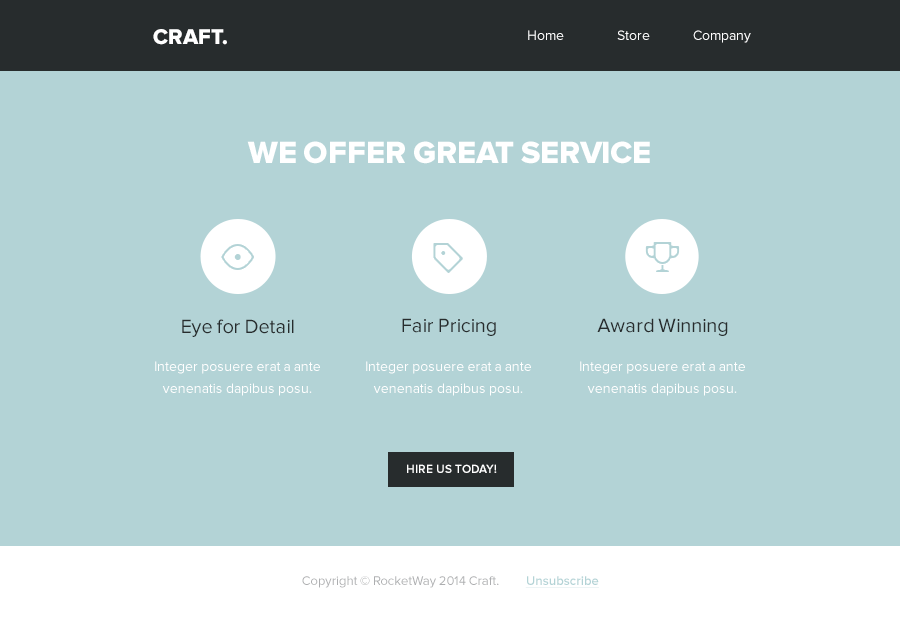
<style>
.page{position:relative;width:900px;height:617px;background:#b3d3d6}
.page>*{position:absolute;margin:0}
.t1{font:22px "ProximaNova-Extrabld";color:#ffffff;text-transform:uppercase}
.t2{font:14px "ProximaNova-Regular";color:#ffffff}
.t3{font:32px "ProximaNova-Extrabld";color:#ffffff;text-transform:uppercase}
.t4{font:20px "ProximaNova-Regular";color:#272c2d}
.t5{font:14px/22px "ProximaNova-Regular";color:#ffffff}
.t6{font:12px "ProximaNova-Semibold";color:#ffffff;text-transform:uppercase}
.t7{font:13px "ProximaNova-Regular";color:#adaeb0}
.t8{font:13px "ProximaNova-Semibold";color:#b3d3d6;text-decoration:underline}
</style>
<div class="page">
<p class="t1" style="left:153px;top:29px;width:74px;height:16px">Craft.</p>
<p class="t2" style="left:528px;top:30px;width:36px;height:10px">Home</p>
<p class="t2" style="left:617px;top:30px;width:33px;height:10px">Store</p>
<p class="t2" style="left:693px;top:30px;width:58px;height:13px">Company</p>
<p class="t3" style="left:247px;top:141px;width:403px;height:23px">We Offer Great Service</p>
<p class="t4" style="left:402px;top:318px;width:94px;height:18px">Fair Pricing</p>
<p class="t4" style="left:597px;top:318px;width:131px;height:18px">Award Winning</p>
<p class="t4" style="left:182px;top:319px;width:112px;height:18px">Eye for Detail</p>
<p class="t5" style="left:155px;top:361px;width:165px;height:35px;text-align:center">Integer posuere erat a ante venenatis dapibus posu.</p>
<p class="t5" style="left:366px;top:361px;width:165px;height:35px;text-align:center">Integer posuere erat a ante venenatis dapibus posu.</p>
<p class="t5" style="left:580px;top:361px;width:165px;height:35px;text-align:center">Integer posuere erat a ante venenatis dapibus posu.</p>
<p class="t6" style="left:407px;top:464px;width:90px;height:9px">hire us today!</p>
<p class="t7" style="left:302px;top:576px;width:297px;height:12px">Copyright © RocketWay 2014 Craft.          <span class="t8">Unsubscribe</span></p>
</div>
